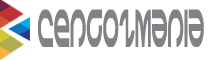
<style>
.page{position:relative;width:208px;height:60px;background:#ffffff}
.page>*{position:absolute;margin:0}
.t1{font:56.5px "AetherfoxCondensed";color:#818285;scale:0.46 1}
</style>
<div class="page">
<p class="t1" style="left:38px;top:9px;width:166px;height:38px">Cengozmania</p>
</div>
